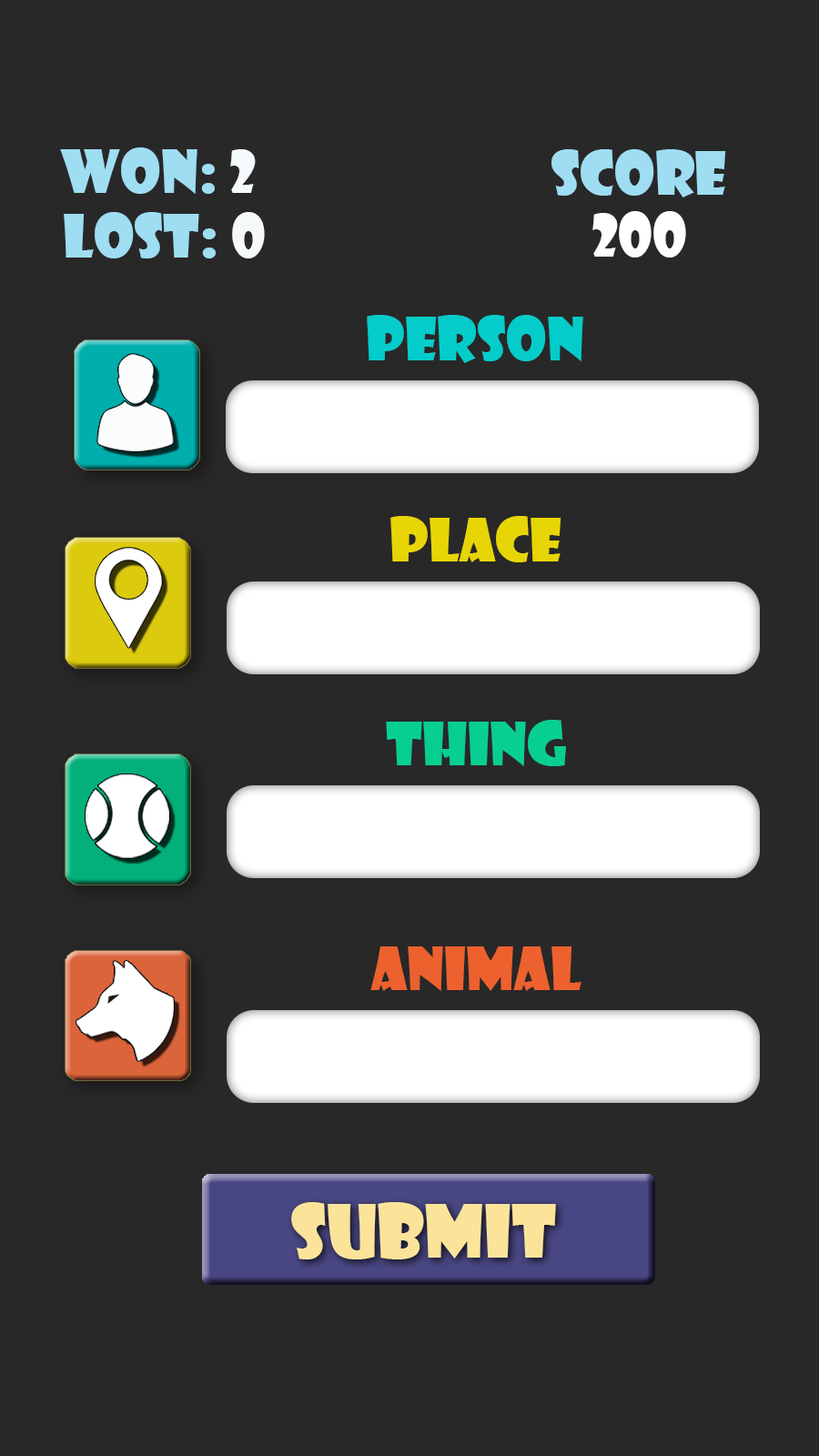
<style>
.page{position:relative;width:819px;height:1456px;background:#282828}
.page>*{position:absolute;margin:0}
.t1{font:58.2px/64.6px "ShowcardGothic-Reg";color:#9eddf2}
.t2{font:58.2px/64.6px "ShowcardGothic-Reg";color:#f5fafc}
.t3{font:58.2px/64.6px "ShowcardGothic-Reg";color:#f5f9fa}
.t4{font:58.2px/61.9px "ShowcardGothic-Reg";color:#9eddf2}
.t5{font:58.2px/61.9px "ShowcardGothic-Reg";color:#ffffff}
.t6{font:58.2px "ShowcardGothic-Reg";color:#04ccca}
.t7{font:58.2px "ShowcardGothic-Reg";color:#e8d505}
.t8{font:58.2px "ShowcardGothic-Reg";color:#07cf91}
.t9{font:58.2px "ShowcardGothic-Reg";color:#ed612f}
.t10{font:71.9px "ShowcardGothic-Reg";color:#fbe49a}
</style>
<div class="page">
<p class="t1" style="left:60px;top:147px;width:205px;height:111px;text-align:center">WON: <span class="t2">2<br></span> LOST: <span class="t3">0</span></p>
<p class="t4" style="left:551px;top:149px;width:175px;height:109px;text-align:center">SCORE<br><span class="t5">200</span></p>
<p class="t6" style="left:367px;top:315px;width:216px;height:48px">PERSON</p>
<p class="t7" style="left:390px;top:516px;width:171px;height:46px">PLACE</p>
<p class="t8" style="left:386px;top:720px;width:180px;height:46px">THING</p>
<p class="t9" style="left:370px;top:946px;width:211px;height:45px">ANIMAL</p>
<p class="t10" style="left:291px;top:1202px;width:265px;height:57px">SUBMIT</p>
</div>
